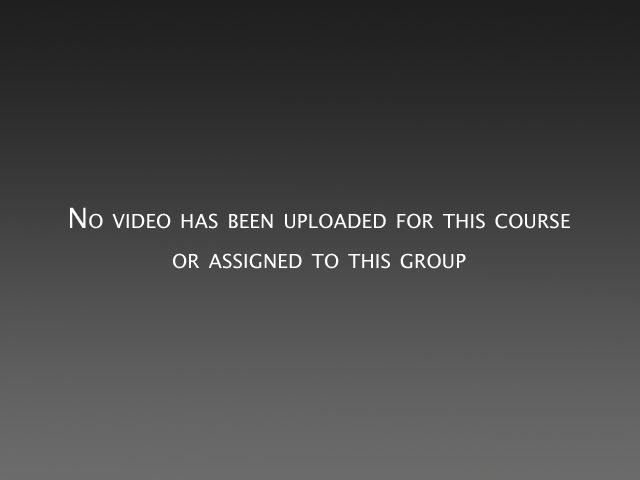
<style>
.page{position:relative;width:640px;height:480px}
.page>*{position:absolute;margin:0}
.t1{font:28px/40px "LucidaSansUnicode";color:#ffffff;font-variant:small-caps}
</style>
<div class="page">
<p class="t1" style="left:70px;top:207px;width:500px;height:62px;text-align:center">No video has been uploaded for this course<br>or assigned to this group</p>
</div>
